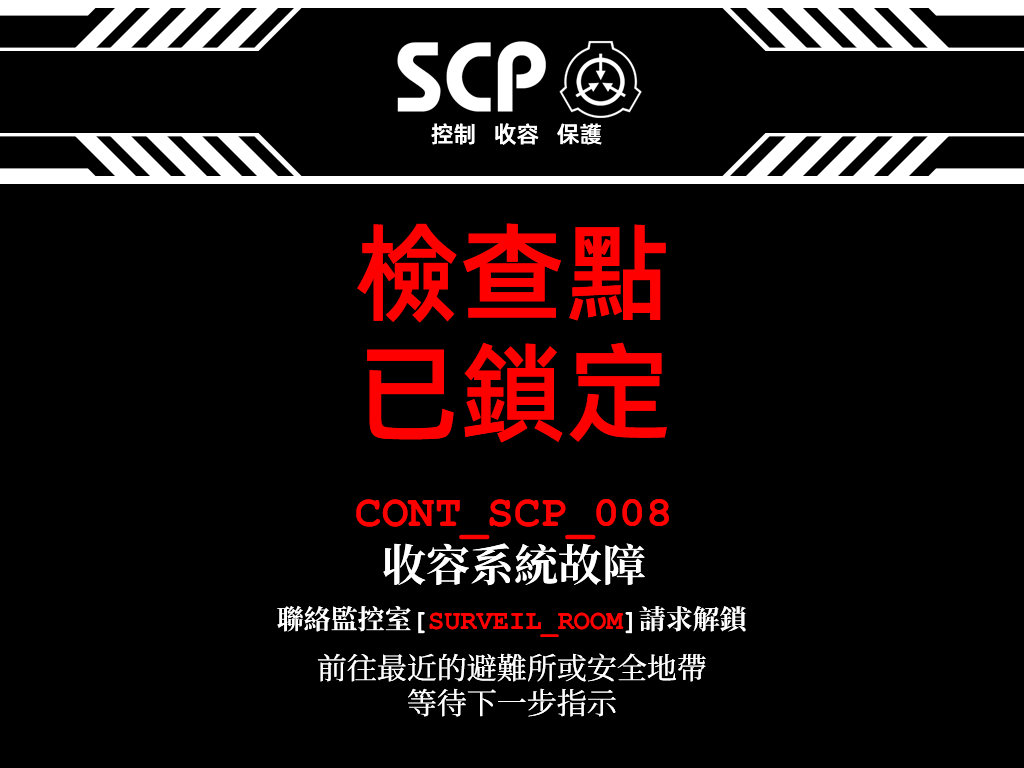
<style>
.page{position:relative;width:1024px;height:768px;background:#000000}
.page>*{position:absolute;margin:0}
.t1{font:23px "AlibabaPuHuiTiM";color:#ffffff}
.t2{font:107px/120px "AlibabaPuHuiTiM";color:#ff0000}
.t3{font:44px/55px "ContainmentBreach-Bold";color:#ff0000}
.t4{font:44px/55px "CourierNewPS-BoldMT";color:#ff0000}
.t5{font:44px/55px "ContainmentBreach-Bold";color:#ffffff}
.t6{font:27px "ContainmentBreach-Bold";color:#ff0000}
.t7{font:27px "ContainmentBreach-Bold";color:#ffffff}
.t8{font:30px/35px "ContainmentBreach-Regular";color:#ffffff}
</style>
<div class="page">
<p class="t1" style="left:431px;top:123px;width:171px;height:22px">控制   收容   保護</p>
<p class="t2" style="left:357px;top:223px;width:310px;height:220px">檢查點<br>已鎖定</p>
<p class="t3" style="left:356px;top:499px;width:313px;height:87px;text-align:center">CONT_SCP_<span class="t4">008<br></span><span class="t5">收容系統故障</span></p>
<p class="t6" style="left:277px;top:605px;width:469px;height:32px"><span class="t7">聯絡監控室[</span>SURVEIL_ROOM<span class="t7">]請求解鎖</span></p>
<p class="t8" style="left:317px;top:653px;width:389px;height:64px;text-align:center">前往最近的避難所或安全地帶<br>等待下一步指示</p>
</div>
